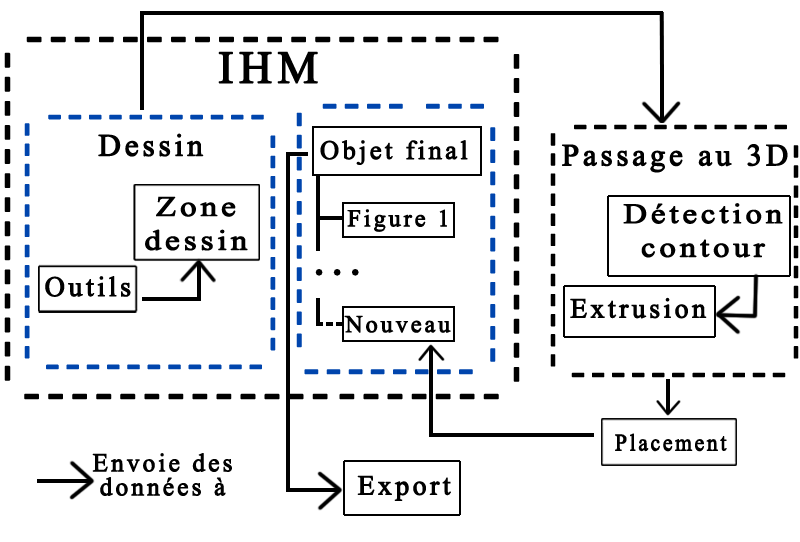
<style>
.page{position:relative;width:800px;height:542px;background:#ffffff}
.page>*{position:absolute;margin:0}
.t1{font:52.3px "TimesNewRomanPSMT";letter-spacing:0.1em;color:#000000;font-weight:bold}
.t2{font:45.5px "TimesNewRomanPSMT";letter-spacing:0.1em;color:#000000;font-weight:bold}
.t3{font:48px "TimesNewRomanPSMT";letter-spacing:0.1em;color:#0045ad;font-weight:bold}
.t4{font:44px "TimesNewRomanPSMT";letter-spacing:0.1em;color:#0045ad;font-weight:bold}
.t5{font:43.7px "TimesNewRomanPSMT";letter-spacing:0.1em;color:#000000;font-weight:bold}
.t6{font:31px "TimesNewRomanPSMT";letter-spacing:0.1em;color:#000000;font-weight:bold}
.t7{font:26.4px "TimesNewRomanPSMT";letter-spacing:0.1em;color:#000000;font-weight:bold}
.t8{font:30.8px "TimesNewRomanPSMT";letter-spacing:0.1em;color:#000000;font-weight:bold}
.t9{font:28.2px "TimesNewRomanPSMT";letter-spacing:0.1em;color:#000000;font-weight:bold;scale:1.16 1}
.t10{font:24px "TimesNewRomanPSMT";letter-spacing:0.1em;color:#000000;font-weight:bold}
.t11{font:28px "TimesNewRomanPSMT";letter-spacing:0.1em;color:#000000;font-weight:bold;scale:1.15 1}
.t12{font:48px "TimesNewRomanPSMT";letter-spacing:0.1em;color:#000000;font-weight:bold}
.t13{font:27.9px "TimesNewRomanPSMT";letter-spacing:0.1em;color:#000000;font-weight:bold}
.t14{font:27.7px "TimesNewRomanPSMT";letter-spacing:0.1em;color:#000000;font-weight:bold}
.t15{font:23.7px "TimesNewRomanPSMT";letter-spacing:0.1em;color:#000000;font-weight:bold;scale:0.91 1}
.t16{font:25.5px/24px "TimesNewRomanPSMT";letter-spacing:0.1em;color:#000000;font-weight:bold}
</style>
<div class="page">
<p class="t1" style="left:4px;top:36px;width:516px;height:364px;text-align:center">--------------------------------------------------------------------------------</p>
<p class="t2" style="left:218px;top:51px;width:100px;height:33px">IHM</p>
<p class="t3" style="left:296px;top:103px;width:200px;height:272px;text-align:center">-----------------------------------------</p>
<p class="t4" style="left:24px;top:114px;width:252px;height:256px;text-align:center">-------------------------------------------------------------------------------------</p>
<p class="t5" style="left:550px;top:124px;width:249px;height:254px;text-align:center">-------------------------------------------------------------------------------------</p>
<p class="t6" style="left:98px;top:133px;width:106px;height:24px">Dessin</p>
<p class="t7" style="left:320px;top:140px;width:148px;height:25px">Objet final</p>
<p class="t8" style="left:562px;top:144px;width:226px;height:29px">Passage au 3D</p>
<p class="t9" style="left:145px;top:196px;width:103px;height:55px;text-align:center">Zone<br>dessin</p>
<p class="t10" style="left:347px;top:209px;width:100px;height:23px">Figure 1</p>
<p class="t11" style="left:623px;top:203px;width:160px;height:55px;text-align:center">Détection<br>contour</p>
<p class="t12" style="left:315px;top:269px;width:44px;height:7px">...</p>
<p class="t13" style="left:45px;top:276px;width:86px;height:21px">Outils</p>
<p class="t14" style="left:570px;top:297px;width:137px;height:22px">Extrusion</p>
<p class="t10" style="left:344px;top:315px;width:107px;height:18px">Nouveau</p>
<p class="t15" style="left:615px;top:433px;width:112px;height:19px">Placement</p>
<p class="t16" style="left:92px;top:453px;width:140px;height:43px;text-align:center">Envoie des<br>données à</p>
<p class="t14" style="left:357px;top:475px;width:94px;height:26px">Export</p>
</div>
